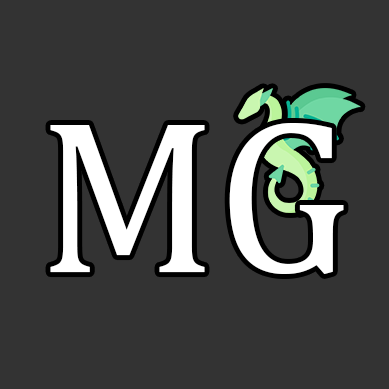
<style>
.page{position:relative;width:389px;height:389px;background:#333333}
.page>*{position:absolute;margin:0}
.t1{font:220px "CambriaMath";color:#ffffff}
</style>
<div class="page">
<p class="t1" style="left:50px;top:123px;width:294px;height:151px">MG</p>
</div>
